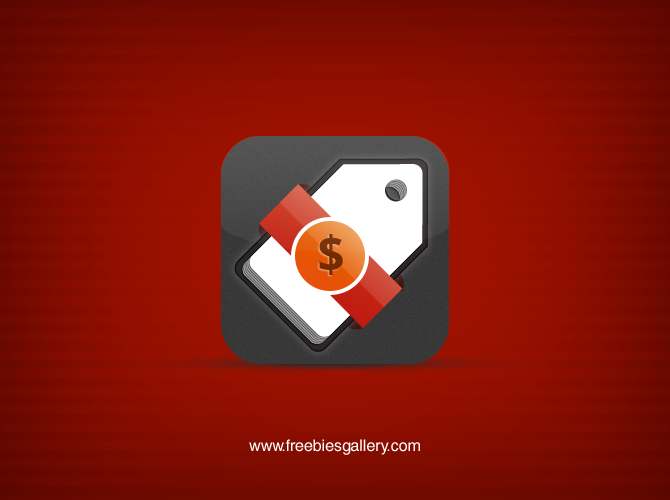
<style>
.page{position:relative;width:670px;height:500px}
.page>*{position:absolute;margin:0}
.t1{font:50px "DroidSans-Bold";color:#752a00}
.t2{font:16px "HelveticaCE-Regular";color:#ffffff}
</style>
<div class="page">
<p class="t1" style="left:319px;top:234px;width:24px;height:41px">$</p>
<p class="t2" style="left:249px;top:439px;width:171px;height:16px">www.freebiesgallery.com</p>
</div>
